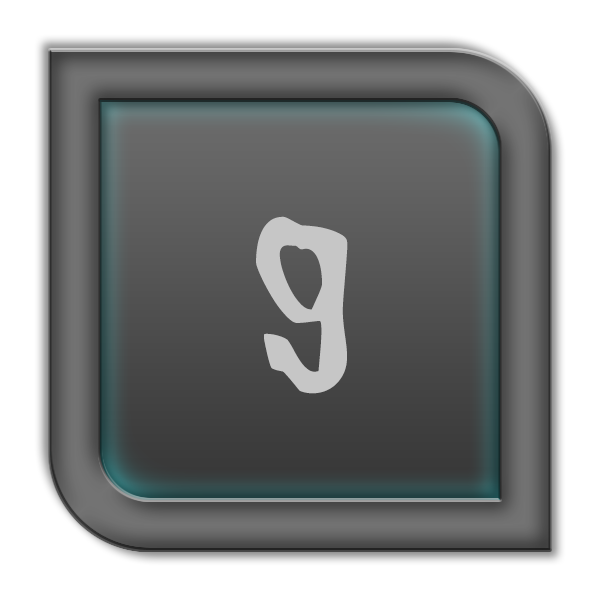
<style>
.page{position:relative;width:600px;height:600px;background:#ffffff}
.page>*{position:absolute;margin:0}
.t1{font:300px "WILD2GhixmNC";color:#c6c6c6;scale:0.83 1}
</style>
<div class="page">
<p class="t1" style="left:256px;top:216px;width:92px;height:178px">9</p>
</div>
